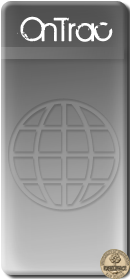
<style>
.page{position:relative;width:130px;height:279px}
.page>*{position:absolute;margin:0}
.t1{font:36px "BIRTHOFAHERO";color:#ffffff}
</style>
<div class="page">
<p class="t1" style="left:17px;top:16px;width:96px;height:26px">OnTrac</p>
</div>
